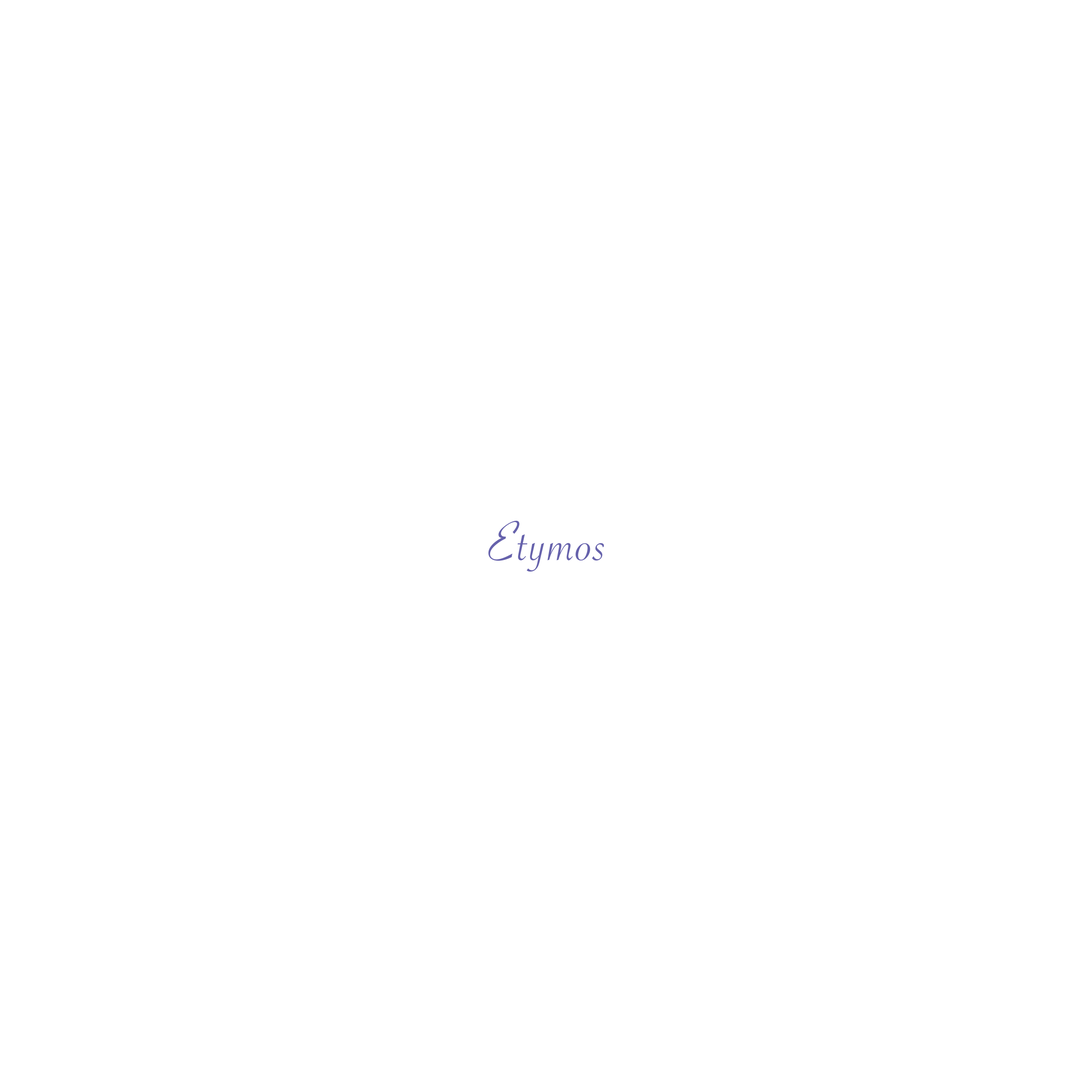
<style>
.page{position:relative;width:1092px;height:1092px;background:#ffffff}
.page>*{position:absolute;margin:0}
.t1{font:60px "SavoyeLetPlain";letter-spacing:0.025em;color:#6662ac;scale:0.95 1}
</style>
<div class="page">
<p class="t1" style="left:488px;top:520px;width:116px;height:52px">Etymos</p>
</div>
